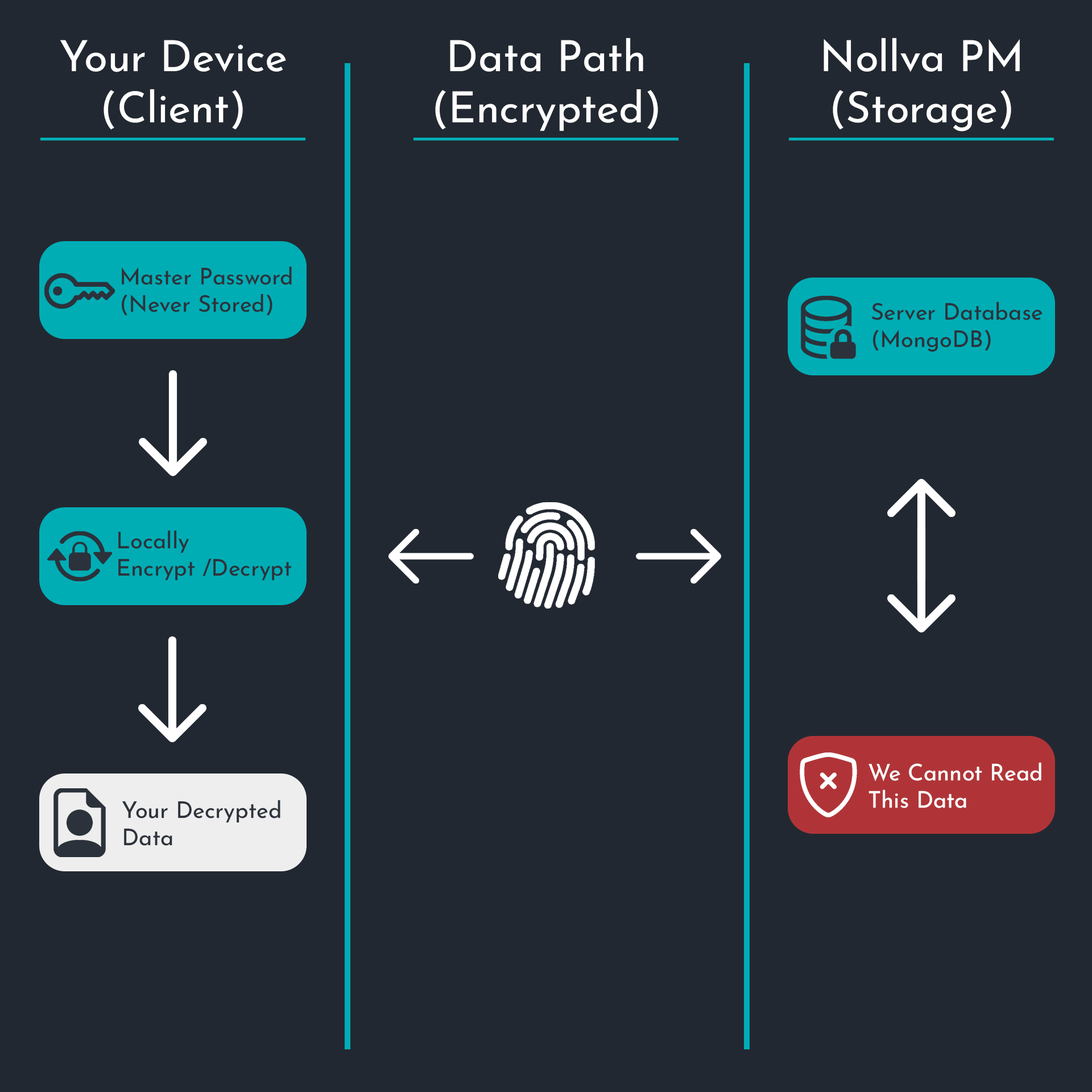
<style>
.page{position:relative;width:1092px;height:1092px;background:#222831}
.page>*{position:absolute;margin:0}
.t1{font:42.7px "JosefinSansRoman-Regular";color:#ffffff}
.t2{font:22.7px "JosefinSansRoman-Regular";color:#2c323b}
.t3{font:22.7px "JosefinSansRoman-Regular";color:#ffffff}
</style>
<div class="page">
<p class="t1" style="left:60px;top:40px;width:226px;height:90px;text-align:center">Your Device<br>(Client)</p>
<p class="t1" style="left:435px;top:38px;width:223px;height:93px;text-align:center">Data Path<br>(Encrypted)</p>
<p class="t1" style="left:824px;top:38px;width:196px;height:93px;text-align:center">Nollva PM<br>(Storage)</p>
<p class="t2" style="left:121px;top:266px;width:171px;height:50px">Master Password<br>(Never Stored)</p>
<p class="t2" style="left:871px;top:301px;width:172px;height:51px">Server Database<br>(MongoDB)</p>
<p class="t2" style="left:118px;top:530px;width:174px;height:51px">Locally <br>Encrypt /Decrypt</p>
<p class="t3" style="left:868px;top:762px;width:173px;height:46px">We Cannot Read<br>This Data</p>
<p class="t2" style="left:122px;top:800px;width:158px;height:46px">Your Decrypted<br>Data</p>
</div>
